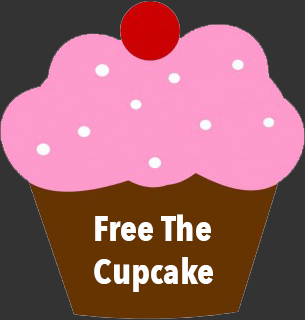
<style>
.page{position:relative;width:305px;height:320px;background:#333333}
.page>*{position:absolute;margin:0}
.t1{font:36px "AvenirNextCondensed-Bold";color:#ffffff}
</style>
<div class="page">
<p class="t1" style="left:94px;top:214px;width:119px;height:78px">Free The Cupcake</p>
</div>
